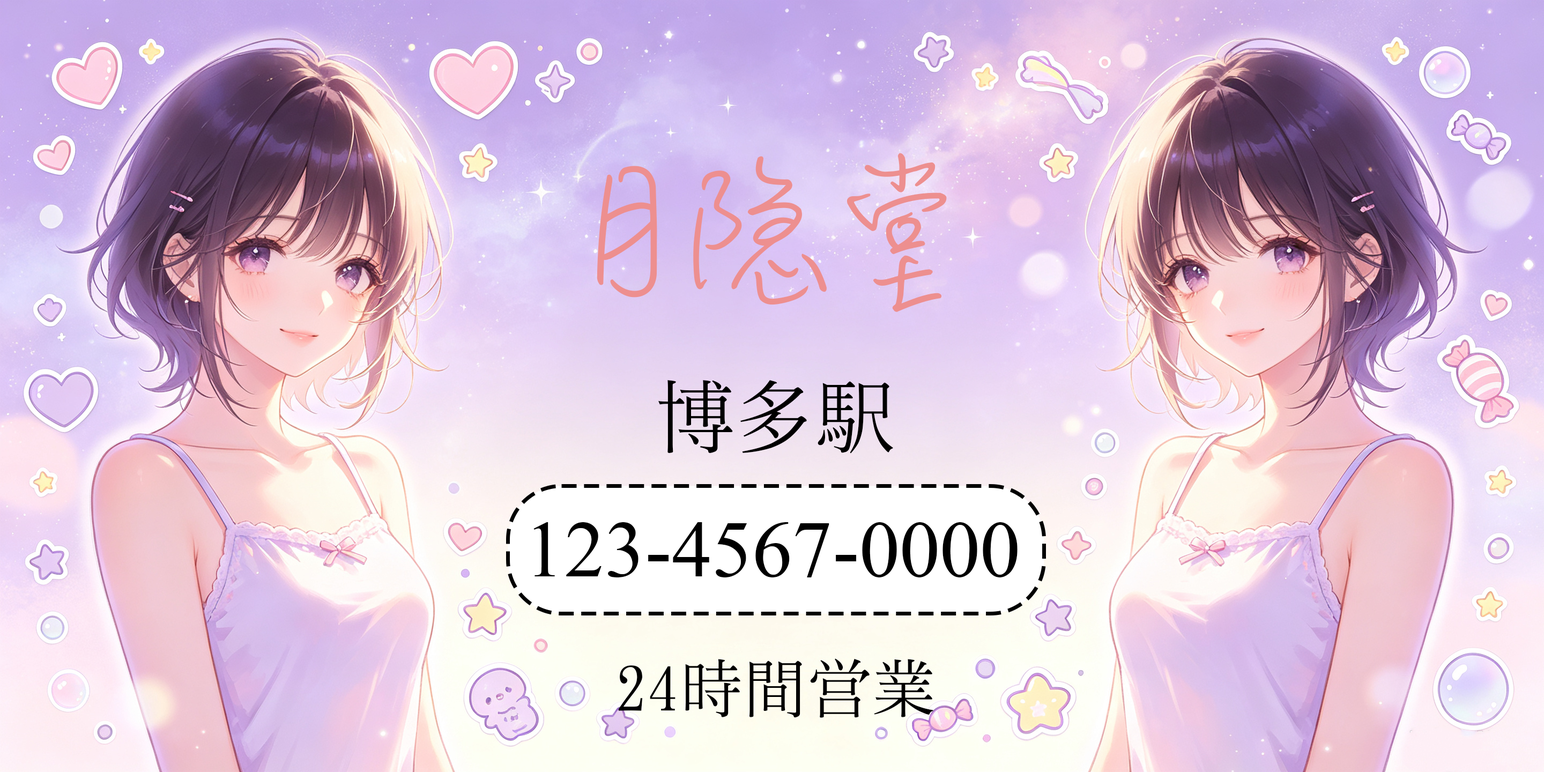
<style>
.page{position:relative;width:1544px;height:772px}
.page>*{position:absolute;margin:0}
.t1{font:187.7px "MLingWaiMedium-SC";color:#ed8f8f}
.t2{font:80.4px "SimSong-Regular";color:#000000}
.t3{font:80.4px "TimesNewRomanPSMT";color:#000000}
.t4{font:64.3px "SimSong-Regular";color:#000000}
</style>
<div class="page">
<p class="t1" style="left:597px;top:153px;width:350px;height:159px">月隐堂</p>
<p class="t2" style="left:658px;top:380px;width:235px;height:74px">博多駅</p>
<p class="t3" style="left:534px;top:522px;width:484px;height:56px">123-4567-0000</p>
<p class="t4" style="left:618px;top:658px;width:316px;height:60px">24時間営業</p>
</div>
